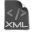
<style>
.page{position:relative;width:32px;height:32px;background:#ffffff}
.page>*{position:absolute;margin:0}
.t1{font:7.2px "PirulenRg-Regular";color:#c2c2c2}
</style>
<div class="page">
<p class="t1" style="left:5px;top:21px;width:23px;height:7px">XML</p>
</div>
